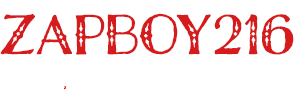
<style>
.page{position:relative;width:300px;height:90px;background:#ffffff}
.page>*{position:absolute;margin:0}
.t1{font:59.7px "CharcuterieFiligree";color:#d51b1b}
.t2{font:3.5px "CharcuterieFiligree";color:#d51b1b}
</style>
<div class="page">
<p class="t1" style="left:0px;top:13px;width:294px;height:42px">ZAPBOY216</p>
<p class="t2" style="left:64px;top:86px;width:3px;height:4px">Z</p>
</div>
